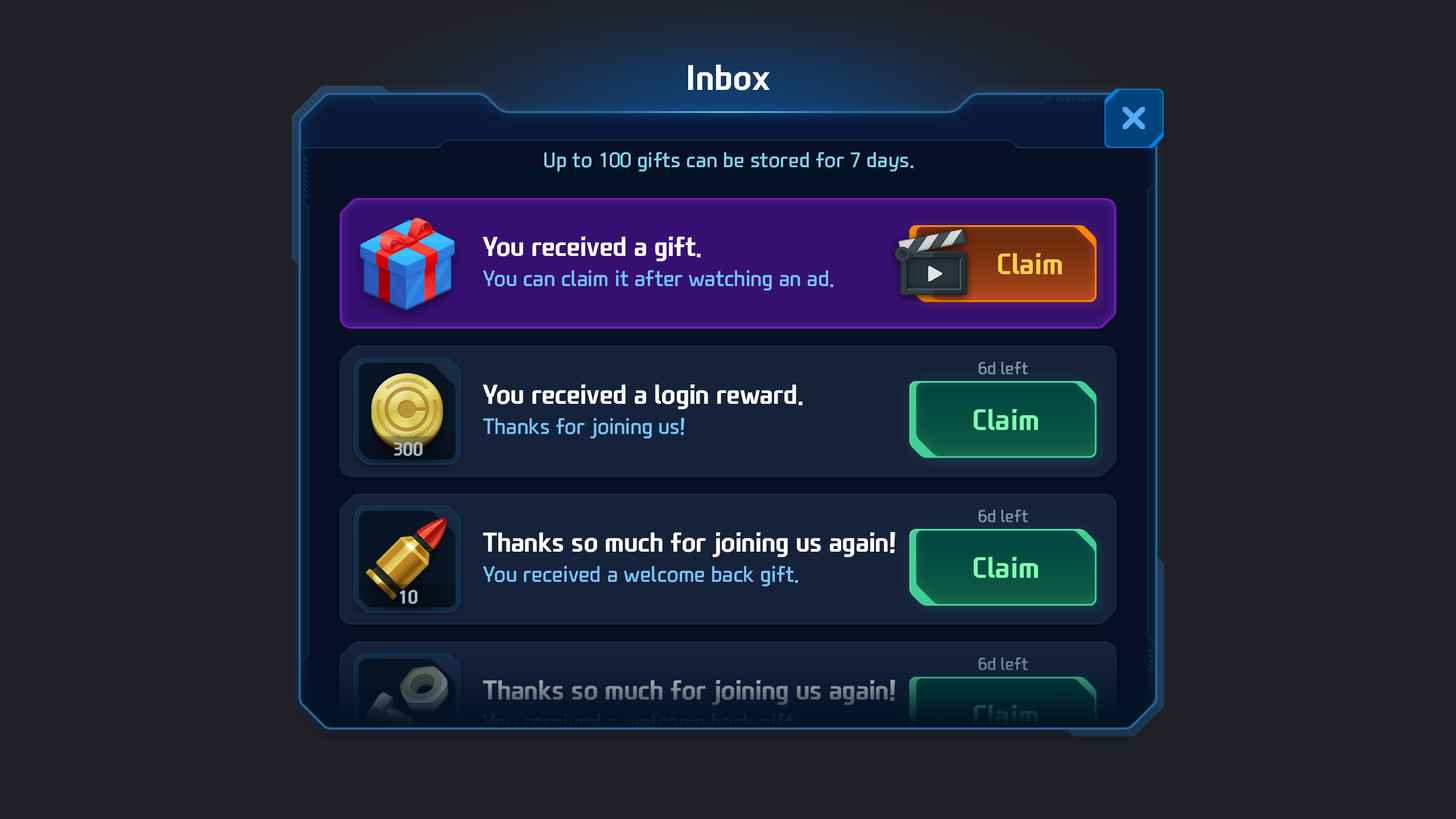
<style>
.page{position:relative;width:1456px;height:819px;background:#212227}
.page>*{position:absolute;margin:0}
.t1{font:34.1px "NEXONFootballGothicB";color:#ffffff}
.t2{font:20.5px "NEXONFootballGothicL";color:#7fd4f0}
.t3{font:26.2px "NEXONFootballGothicB";color:#ffffff}
.t4{font:28.4px "NEXONFootballGothicB";color:#ffd24a}
.t5{font:21.6px "NEXONFootballGothicL";color:#76c7ff}
.t6{font:17.1px "NEXONFootballGothicL";color:#7b97ad}
.t7{font:28.4px "NEXONFootballGothicB";color:#7effb1}
.t8{font:17.9px "NEXONFootballGothicB";color:#a7bbca;text-transform:uppercase}
.t9{font:26.2px "NEXONFootballGothicB"}
.t10{font:28.4px "NEXONFootballGothicB";color:#0c2731}
</style>
<div class="page">
<p class="t1" style="left:688px;top:64px;width:82px;height:26px">Inbox</p>
<p class="t2" style="left:544px;top:152px;width:369px;height:20px">Up to 100 gifts can be stored for 7 days.</p>
<p class="t3" style="left:483px;top:237px;width:218px;height:25px">You received a gift.</p>
<p class="t4" style="left:998px;top:253px;width:64px;height:21px">Claim</p>
<p class="t5" style="left:483px;top:270px;width:350px;height:21px">You can claim it after watching an ad.</p>
<p class="t6" style="left:978px;top:362px;width:50px;height:13px">6d left</p>
<p class="t3" style="left:483px;top:384px;width:319px;height:25px">You received a login reward.</p>
<p class="t7" style="left:974px;top:409px;width:64px;height:21px">Claim</p>
<p class="t5" style="left:483px;top:417px;width:201px;height:22px">Thanks for joining us!</p>
<p class="t8" style="left:394px;top:442px;width:29px;height:14px">300</p>
<p class="t6" style="left:978px;top:510px;width:50px;height:13px">6d left</p>
<p class="t3" style="left:483px;top:532px;width:412px;height:25px">Thanks so much for joining us again!</p>
<p class="t7" style="left:974px;top:557px;width:64px;height:21px">Claim</p>
<p class="t5" style="left:483px;top:566px;width:315px;height:20px">You received a welcome back gift.</p>
<p class="t8" style="left:400px;top:590px;width:17px;height:14px">10</p>
<p class="t6" style="left:978px;top:657px;width:50px;height:14px">6d left</p>
<p class="t9" style="left:483px;top:680px;width:412px;height:25px">Thanks so much for joining us again!</p>
<p class="t10" style="left:974px;top:705px;width:64px;height:21px">Claim</p>
</div>
